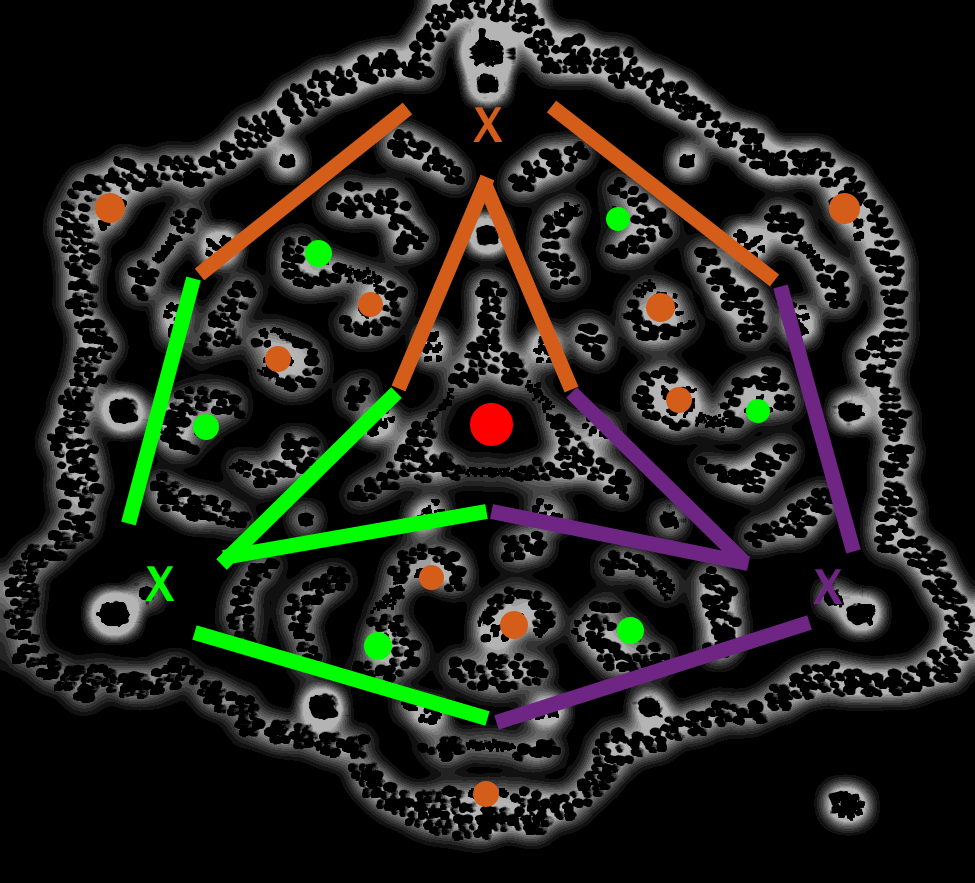
<style>
.page{position:relative;width:975px;height:883px;background:#000000}
.page>*{position:absolute;margin:0}
.t1{font:52px "FranklinGothic-Medium";color:#d45e19}
.t2{font:52px "FranklinGothic-Medium";color:#00ff00}
.t3{font:52px "FranklinGothic-Medium";color:#6f2583}
</style>
<div class="page">
<p class="t1" style="left:473px;top:107px;width:30px;height:35px">X</p>
<p class="t2" style="left:145px;top:566px;width:30px;height:35px">X</p>
<p class="t3" style="left:813px;top:569px;width:30px;height:35px">X</p>
</div>
